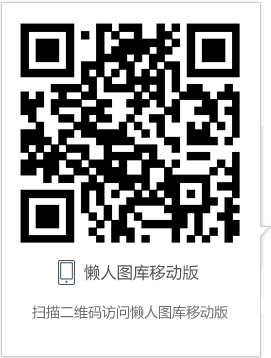
<style>
.page{position:relative;width:271px;height:358px;background:#ffffff}
.page>*{position:absolute;margin:0}
.t1{font:16px "MicrosoftYaHei";letter-spacing:0.025em;color:#555555}
.t2{font:14px "MicrosoftYaHei";color:#707070}
</style>
<div class="page">
<p class="t1" style="left:84px;top:264px;width:115px;height:17px">懒人图库移动版</p>
<p class="t2" style="left:32px;top:305px;width:196px;height:14px">扫描二维码访问懒人图库移动版</p>
</div>
